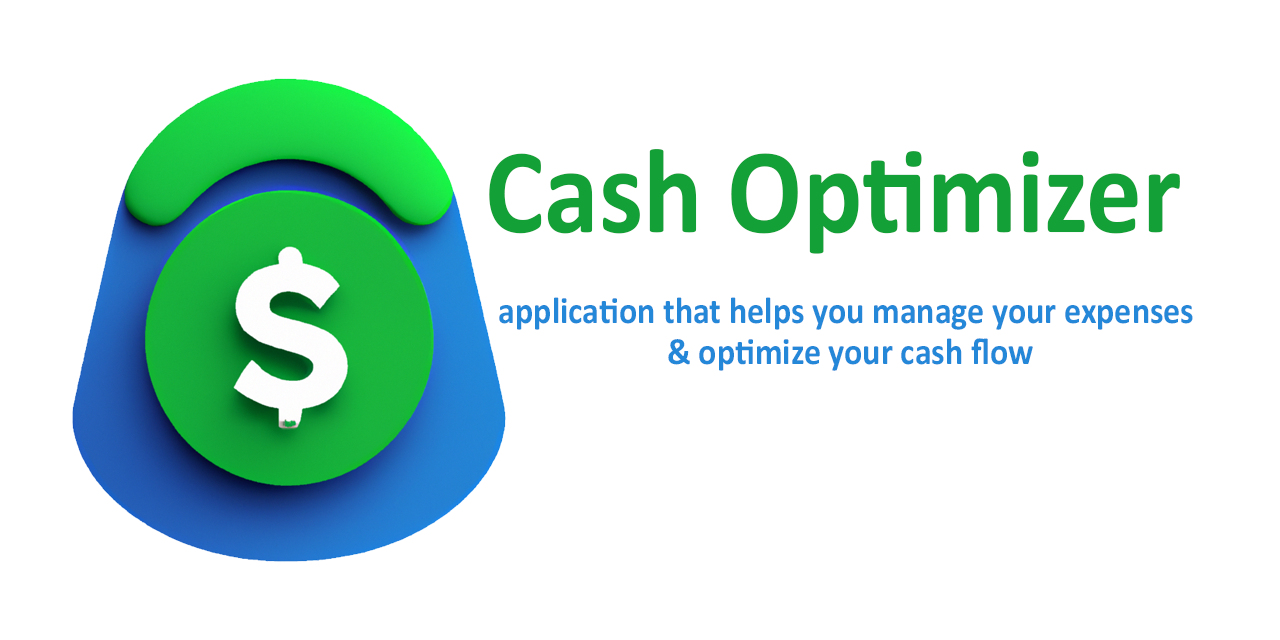
<style>
.page{position:relative;width:1280px;height:640px;background:#ffffff}
.page>*{position:absolute;margin:0}
.t1{font:122.1px "Calibri-Bold";color:#12a037;scale:0.91 1}
.t2{font:37.4px "Calibri-Bold";color:#2487d8;scale:0.91 1}
</style>
<div class="page">
<p class="t1" style="left:489px;top:149px;width:691px;height:105px">Cash Optimizer</p>
<p class="t2" style="left:499px;top:297px;width:694px;height:74px;text-align:center">application that helps you manage your expenses <br>&amp; optimize your cash flow</p>
</div>
